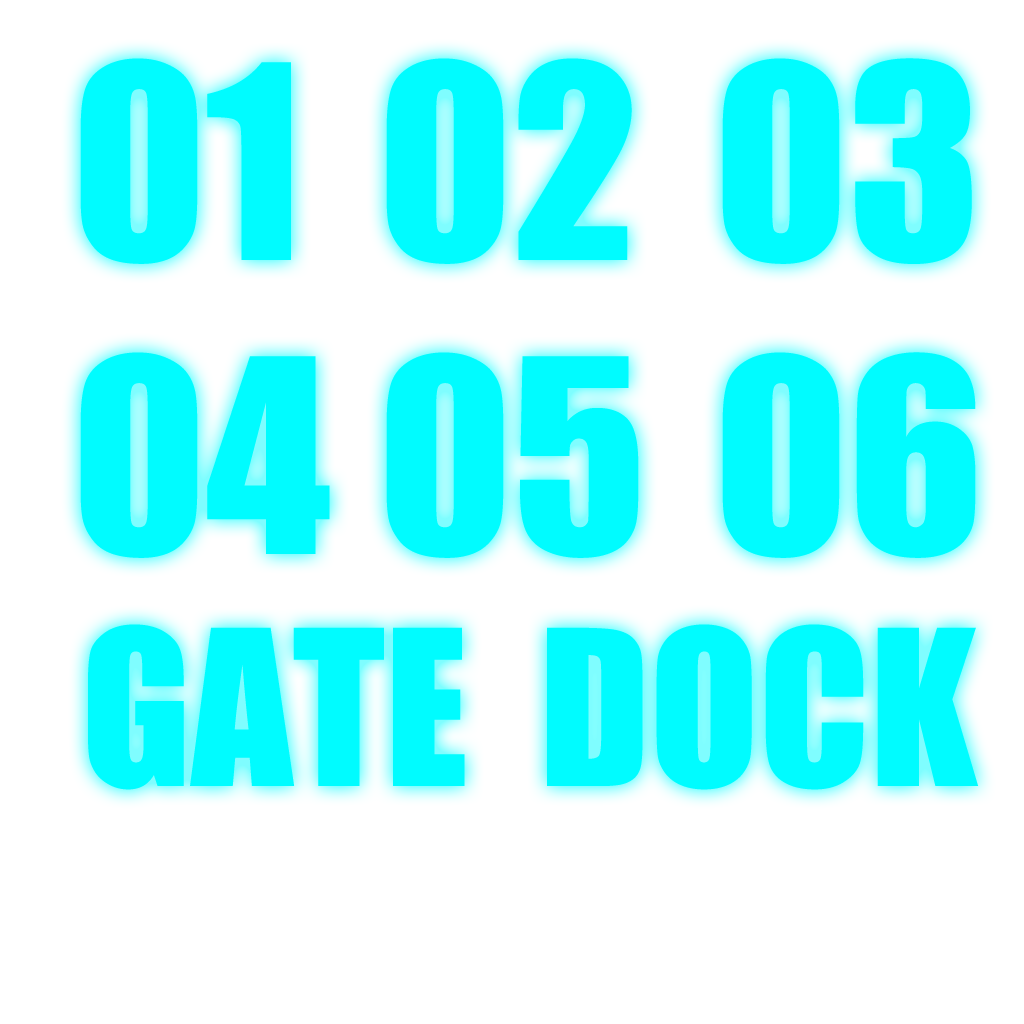
<style>
.page{position:relative;width:1024px;height:1024px;background:#ffffff}
.page>*{position:absolute;margin:0}
.t1{font:250px "Impact";color:#00fcff}
.t2{font:200px "Impact";color:#00fcff}
</style>
<div class="page">
<p class="t1" style="left:80px;top:58px;width:211px;height:206px">01</p>
<p class="t1" style="left:386px;top:58px;width:246px;height:206px">02</p>
<p class="t1" style="left:722px;top:58px;width:250px;height:206px">03</p>
<p class="t1" style="left:80px;top:352px;width:250px;height:206px">04</p>
<p class="t1" style="left:386px;top:352px;width:253px;height:206px">05</p>
<p class="t1" style="left:722px;top:352px;width:254px;height:206px">06</p>
<p class="t2" style="left:88px;top:624px;width:377px;height:166px">GATE</p>
<p class="t2" style="left:547px;top:624px;width:432px;height:166px">DOCK</p>
</div>
